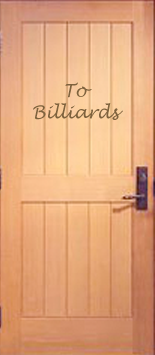
<style>
.page{position:relative;width:155px;height:355px}
.page>*{position:absolute;margin:0}
.t1{font:18px "LucidaHandwriting-Italic";letter-spacing:-0.025em;color:#7e623d}
</style>
<div class="page">
<p class="t1" style="left:33px;top:82px;width:90px;height:38px;text-align:center">To<br>Billiards</p>
</div>
